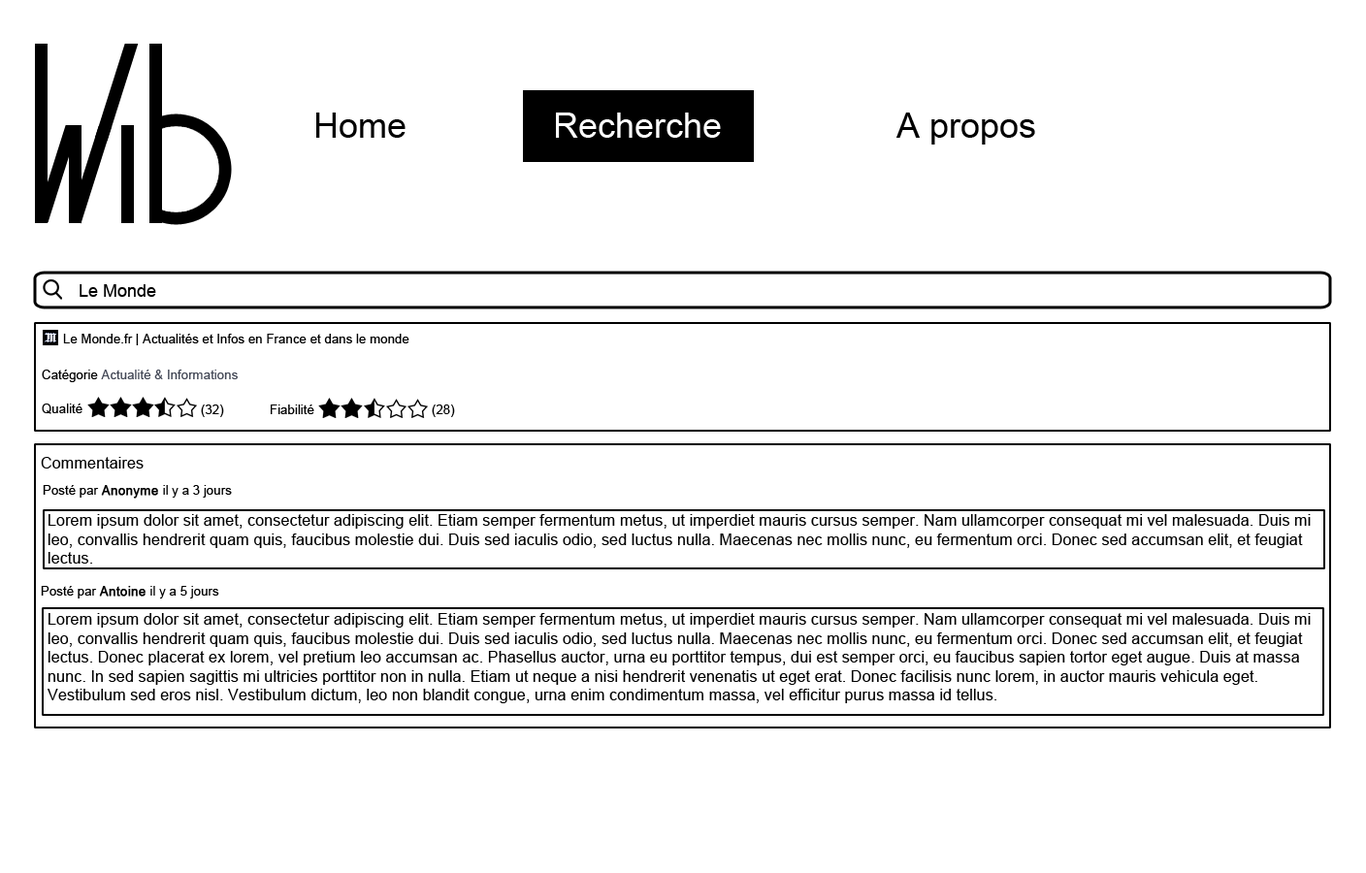
<style>
.page{position:relative;width:1366px;height:873px;background:#ffffff}
.page>*{position:absolute;margin:0}
.t1{font:34.9px "ArialMT";color:#000000}
.t2{font:34.9px "ArialMT";color:#ffffff}
.t3{font:17.5px "ArialMT";color:#000000}
.t4{font:12.9px "ArialMT";color:#000000}
.t5{font:12.9px "ArialMT";color:#424755}
.t6{font:15.8px "ArialMT";color:#000000}
.t7{font:12.9px "ArialMT";color:#000000;font-weight:bold}
</style>
<div class="page">
<p class="t1" style="left:316px;top:113px;width:89px;height:25px">Home</p>
<p class="t2" style="left:556px;top:113px;width:165px;height:25px">Recherche</p>
<p class="t1" style="left:896px;top:113px;width:139px;height:32px">A propos</p>
<p class="t3" style="left:80px;top:284px;width:76px;height:13px">Le Monde</p>
<p class="t4" style="left:63px;top:334px;width:346px;height:11px">Le Monde.fr | Actualités et Infos en France et dans le monde</p>
<p class="t5" style="left:42px;top:370px;width:196px;height:12px"><span class="t4">Catégorie </span>Actualité &amp; Informations</p>
<p class="t4" style="left:42px;top:404px;width:40px;height:10px">Qualité</p>
<p class="t4" style="left:201px;top:405px;width:23px;height:12px">(32)</p>
<p class="t4" style="left:271px;top:405px;width:43px;height:9px">Fiabilité</p>
<p class="t4" style="left:432px;top:405px;width:23px;height:12px">(28)</p>
<p class="t6" style="left:41px;top:457px;width:103px;height:12px">Commentaires</p>
<p class="t4" style="left:43px;top:485px;width:189px;height:14px">Posté par <span class="t7">Anonyme </span>il y a 3 jours</p>
<p class="t6" style="left:48px;top:514px;width:1263px;height:50px">Lorem ipsum dolor sit amet, consectetur adipiscing elit. Etiam semper fermentum metus, ut imperdiet mauris cursus semper. Nam ullamcorper consequat mi vel malesuada. Duis mi<br>leo, convallis hendrerit quam quis, faucibus molestie dui. Duis sed iaculis odio, sed luctus nulla. Maecenas nec mollis nunc, eu fermentum orci. Donec sed accumsan elit, et feugiat<br>lectus.</p>
<p class="t4" style="left:41px;top:586px;width:178px;height:13px">Posté par <span class="t7">Antoine </span>il y a 5 jours</p>
<p class="t6" style="left:48px;top:613px;width:1263px;height:90px">Lorem ipsum dolor sit amet, consectetur adipiscing elit. Etiam semper fermentum metus, ut imperdiet mauris cursus semper. Nam ullamcorper consequat mi vel malesuada. Duis mi<br>leo, convallis hendrerit quam quis, faucibus molestie dui. Duis sed iaculis odio, sed luctus nulla. Maecenas nec mollis nunc, eu fermentum orci. Donec sed accumsan elit, et feugiat<br>lectus. Donec placerat ex lorem, vel pretium leo accumsan ac. Phasellus auctor, urna eu porttitor tempus, dui est semper orci, eu faucibus sapien tortor eget augue. Duis at massa <br>nunc. In sed sapien sagittis mi ultricies porttitor non in nulla. Etiam ut neque a nisi hendrerit venenatis ut eget erat. Donec facilisis nunc lorem, in auctor mauris vehicula eget. <br>Vestibulum sed eros nisl. Vestibulum dictum, leo non blandit congue, urna enim condimentum massa, vel efficitur purus massa id tellus.</p>
</div>
